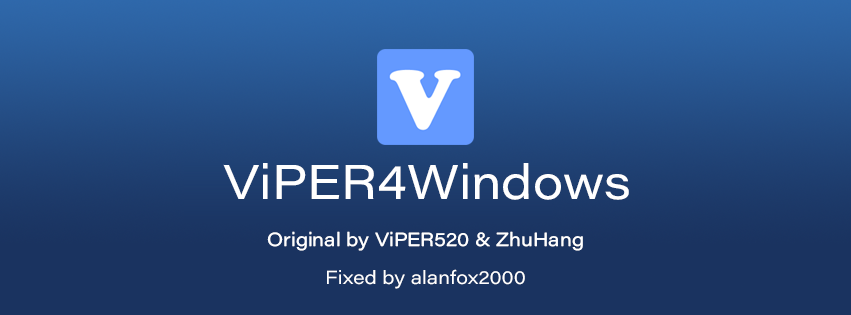
<style>
.page{position:relative;width:851px;height:315px;background:#1a3360}
.page>*{position:absolute;margin:0}
.t1{font:48px "AcuminConcept-Wide";color:#ffffff}
.t2{font:18.7px "AcuminConcept-Wide";color:#ffffff}
</style>
<div class="page">
<p class="t1" style="left:223px;top:163px;width:406px;height:37px">ViPER4Windows</p>
<p class="t2" style="left:267px;top:231px;width:316px;height:20px">Original by ViPER520 &amp; ZhuHang</p>
<p class="t2" style="left:327px;top:269px;width:198px;height:20px">Fixed by alanfox2000</p>
</div>
